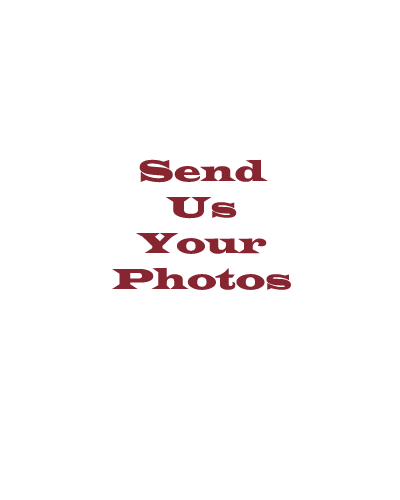
<style>
.page{position:relative;width:400px;height:500px;background:#ffffff}
.page>*{position:absolute;margin:0}
.t1{font:30px "LatinWide";color:#872631}
</style>
<div class="page">
<p class="t1" style="left:112px;top:159px;width:179px;height:131px;text-align:center">Send<br>Us<br>Your <br>Photos</p>
</div>
